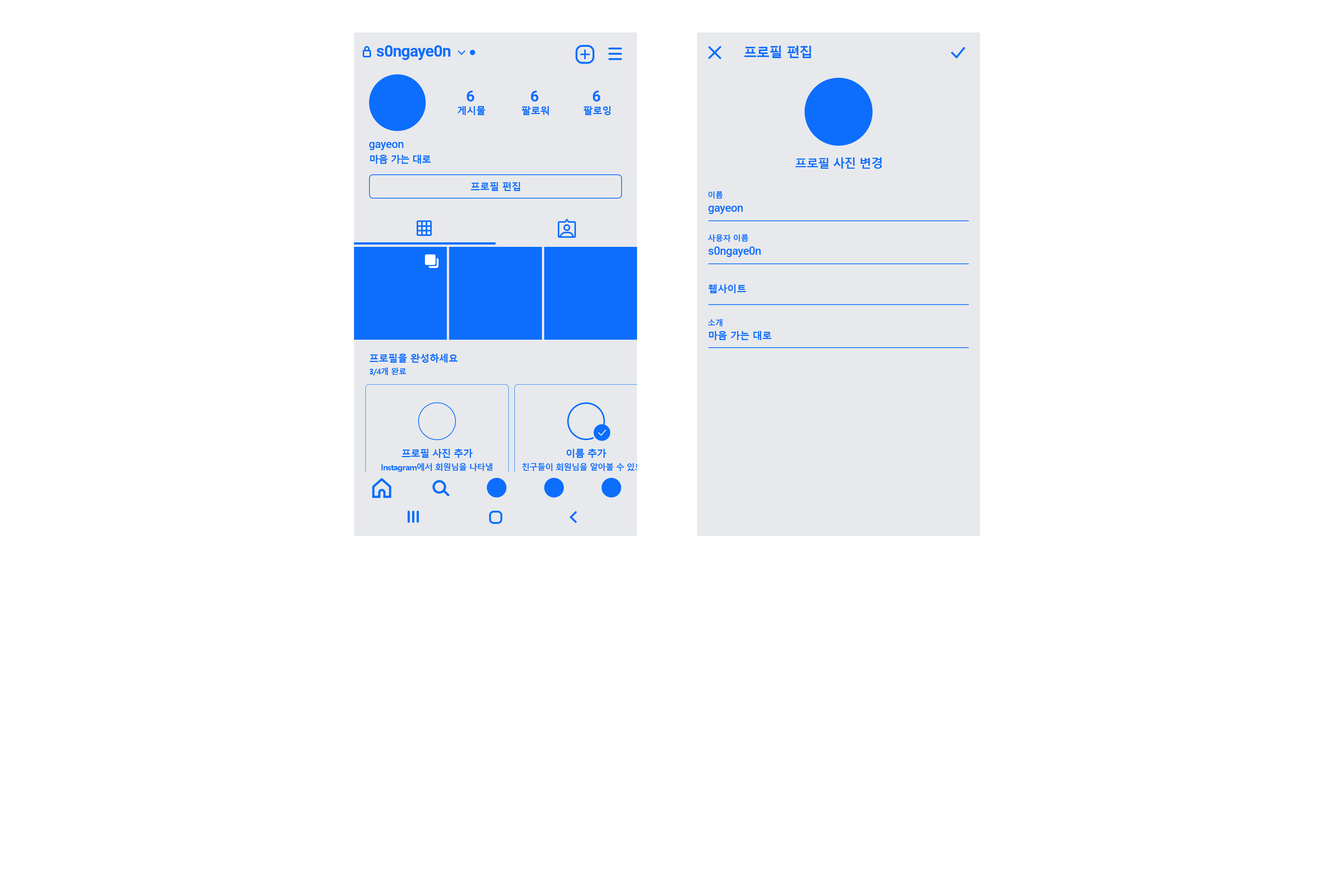
<style>
.page{position:relative;width:1339px;height:890px;background:#ffffff}
.page>*{position:absolute;margin:0}
.t1{font:15.9px "Roboto-Bold";letter-spacing:-0.025em;color:#0d6efd}
.t2{font:13.6px "MalgunGothicBold";letter-spacing:-0.05em;color:#0d6efd}
.t3{font:15.1px "Roboto-Bold";letter-spacing:-0.025em;color:#0d6efd}
.t4{font:9.8px "MalgunGothicBold";letter-spacing:-0.03em;color:#0d6efd}
.t5{font:11.3px "Roboto-Medium";letter-spacing:-0.025em;color:#0d6efd}
.t6{font:9.8px "MalgunGothicBold";letter-spacing:-0.05em;color:#0d6efd}
.t7{font:12.1px "MalgunGothicBold";letter-spacing:-0.05em;color:#0d6efd}
.t8{font:7.9px "MalgunGothicBold";letter-spacing:-0.03em;color:#0d6efd}
.t9{font:9.8px "MalgunGothicBold";letter-spacing:-0.025em;color:#0d6efd}
.t10{font:8.3px/12.1px "MalgunGothicBold";letter-spacing:-0.05em}
</style>
<div class="page">
<p class="t1" style="left:377px;top:45px;width:74px;height:15px">s0ngaye0n</p>
<p class="t2" style="left:744px;top:46px;width:67px;height:12px">프로필 편집</p>
<p class="t3" style="left:467px;top:91px;width:8px;height:11px">6</p>
<p class="t3" style="left:531px;top:91px;width:8px;height:11px">6</p>
<p class="t3" style="left:593px;top:91px;width:8px;height:11px">6</p>
<p class="t4" style="left:458px;top:106px;width:28px;height:9px">게시물</p>
<p class="t4" style="left:522px;top:106px;width:27px;height:9px">팔로워</p>
<p class="t4" style="left:584px;top:106px;width:27px;height:9px">팔로잉</p>
<p class="t5" style="left:369px;top:142px;width:35px;height:8px">gayeon</p>
<p class="t6" style="left:370px;top:155px;width:61px;height:9px">마음 가는 대로</p>
<p class="t7" style="left:796px;top:157px;width:86px;height:12px">프로필 사진 변경</p>
<p class="t4" style="left:471px;top:182px;width:49px;height:9px">프로필 편집</p>
<p class="t8" style="left:709px;top:191px;width:14px;height:8px">이름</p>
<p class="t5" style="left:709px;top:206px;width:34px;height:8px">gayeon</p>
<p class="t8" style="left:708px;top:234px;width:41px;height:8px">사용자 이름</p>
<p class="t5" style="left:709px;top:247px;width:52px;height:10px">s0ngaye0n</p>
<p class="t9" style="left:709px;top:284px;width:37px;height:9px">웹사이트</p>
<p class="t8" style="left:708px;top:319px;width:15px;height:8px">소개</p>
<p class="t9" style="left:709px;top:331px;width:63px;height:9px">마음 가는 대로</p>
<p class="t4" style="left:370px;top:354px;width:88px;height:9px">프로필을 완성하세요</p>
<p class="t8" style="left:370px;top:368px;width:36px;height:8px">3/4개 완료</p>
<p class="t6" style="left:402px;top:449px;width:71px;height:9px">프로필 사진 추가</p>
<p class="t6" style="left:567px;top:449px;width:40px;height:9px">이름 추가</p>
<p class="t10" style="left:381px;top:463px;width:112px;height:20px;text-align:center">Instagram에서 회원님을 나타낼<br>프로필 사진을 선택하세요.</p>
<p class="t10" style="left:522px;top:463px;width:128px;height:20px;text-align:center">친구들이 회원님을 알아볼 수 있도록<br>이름과 성을 모두 추가하세요.</p>
</div>
